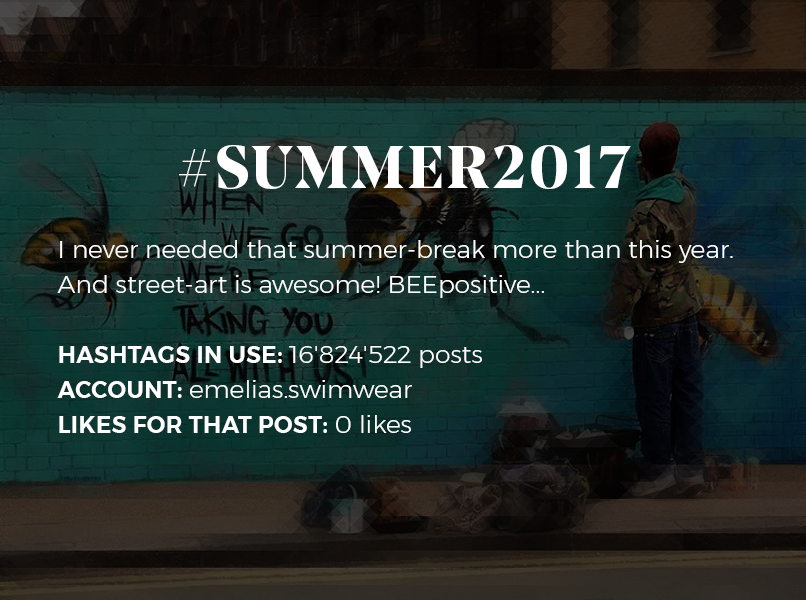
<style>
.page{position:relative;width:806px;height:600px}
.page>*{position:absolute;margin:0}
.t1{font:25px/35px "Montserrat-Light";color:#ffffff}
.t2{font:60px/35px "NoeDisplay-Bold";letter-spacing:0.05em;color:#ffffff;text-transform:uppercase}
.t3{font:23px/35px "Montserrat-SemiBold";letter-spacing:0.02em;color:#ffffff;text-transform:uppercase}
</style>
<div class="page">
<p class="t1" style="left:57px;top:144px;width:676px;height:289px;text-align:center"><span class="t2">#summer2017<br></span><br>I never needed that summer-break more than this year. And street-art is awesome! BEEpositive...<br><br><span class="t3">Hashtags in use: </span>16'824'522 posts<br><span class="t3">Account: </span>emelias.swimwear<br><span class="t3">Likes for that post: </span>0 likes</p>
</div>
